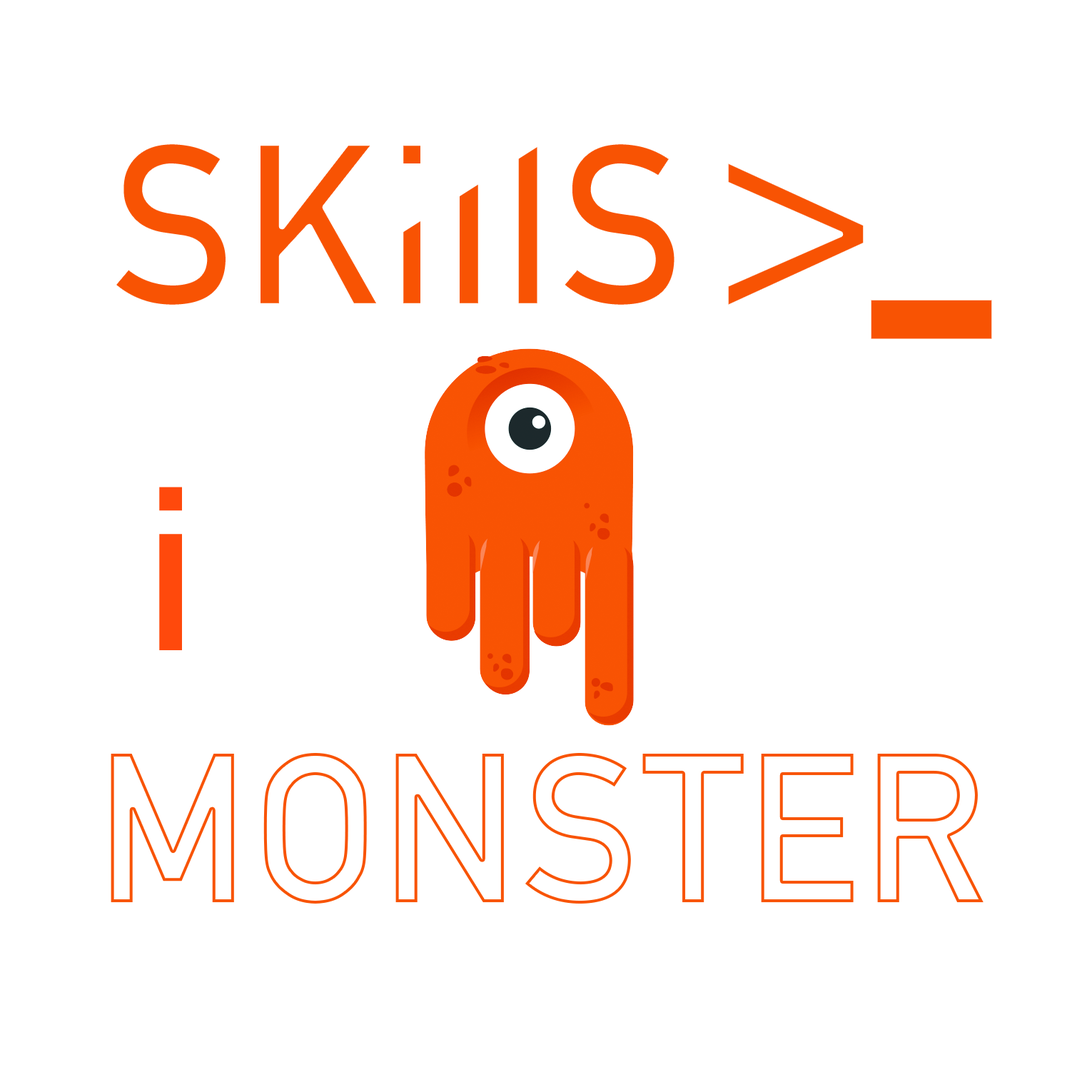
<style>
.page{position:relative;width:1092px;height:1092px;background:#ffffff}
.page>*{position:absolute;margin:0}
.t1{font:229px "DINAlternate-Bold";color:#ff490c}
.t2{font:285.5px "DINAlternate-Bold";color:#ff490c}
.t3{font:432.5px "DINAlternate-Bold";color:#ff490c}
.t4{font:208.2px "DINAlternate-Bold";color:#ffffff}
</style>
<div class="page">
<p class="t1" style="left:112px;top:141px;width:565px;height:167px">SKiIIS</p>
<p class="t2" style="left:725px;top:159px;width:141px;height:150px">&gt;</p>
<p class="t3" style="left:868px;top:297px;width:127px;height:45px">-</p>
<p class="t1" style="left:159px;top:487px;width:23px;height:163px">i</p>
<p class="t4" style="left:111px;top:753px;width:873px;height:151px">MONSTER</p>
</div>
